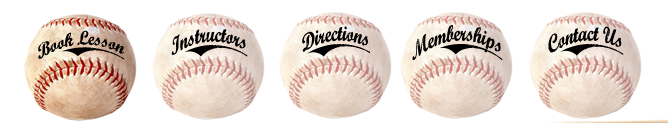
<style>
.page{position:relative;width:668px;height:123px;background:#ffffff}
.page>*{position:absolute;margin:0}
.t1{font:19px "MarcelleScript";color:#000000;scale:0.62 1}
.t2{font:19px "MarcelleSwashes";color:#000000;scale:0.62 1}
.t3{font:23.1px "MarcelleScript";color:#000000;scale:0.51 1}
.t4{font:23.1px "MarcelleSwashes";color:#000000;scale:0.51 1}
</style>
<div class="page">
<p class="t1" style="left:38px;top:30px;width:87px;height:30px">Book Lesson<span class="t2">n</span></p>
<p class="t3" style="left:171px;top:29px;width:77px;height:28px">Instructors<span class="t4">n</span></p>
<p class="t3" style="left:302px;top:26px;width:68px;height:31px">Directions<span class="t4">n</span></p>
<p class="t3" style="left:412px;top:25px;width:91px;height:36px">Memberships<span class="t4">n</span></p>
<p class="t3" style="left:548px;top:26px;width:76px;height:30px">Contact Us<span class="t4">n</span></p>
</div>
